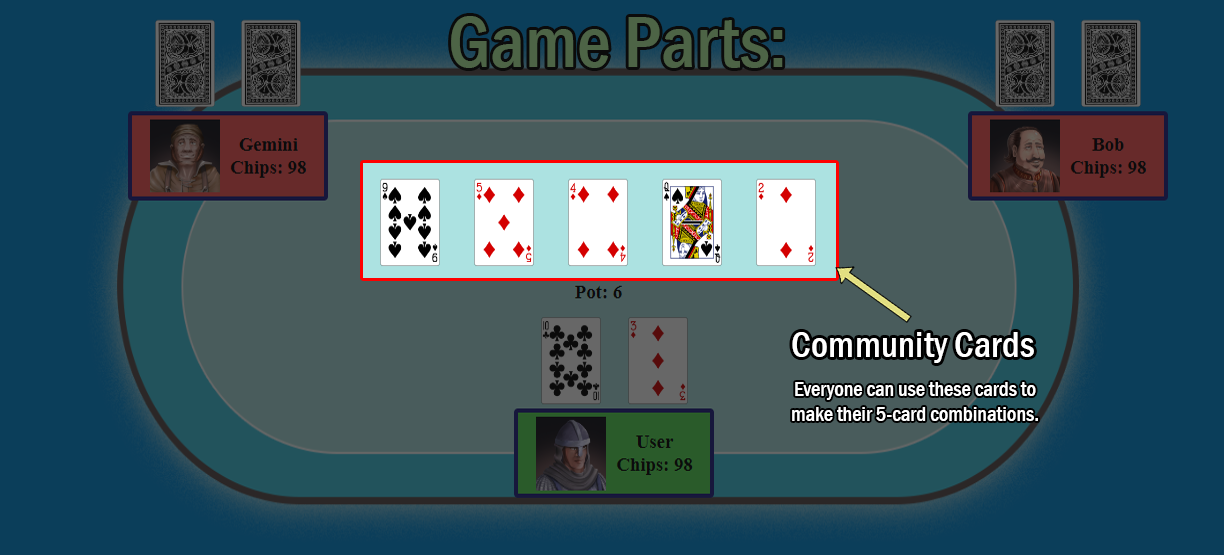
<style>
.page{position:relative;width:1224px;height:555px;background:#0b3e5a}
.page>*{position:absolute;margin:0}
.t1{font:75px "FranklinGothic-MediumCond";color:#4d6446}
.t2{font:37.5px "FranklinGothic-MediumCond";color:#ffffff}
.t3{font:20.8px "FranklinGothic-MediumCond";color:#ffffff}
</style>
<div class="page">
<p class="t1" style="left:451px;top:16px;width:332px;height:52px">Game Parts:</p>
<p class="t2" style="left:792px;top:332px;width:242px;height:31px">Community Cards</p>
<p class="t3" style="left:792px;top:382px;width:246px;height:39px;text-align:center">Everyone can use these cards to<br>make their 5-card combinations.</p>
</div>
